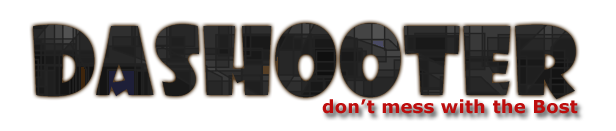
<style>
.page{position:relative;width:616px;height:131px;background:#ffffff}
.page>*{position:absolute;margin:0}
.t1{font:92px "ShowcardGothic-Reg";letter-spacing:0.01em;color:#222222}
.t2{font:18px "Verdana-Bold";letter-spacing:0.01em;color:#bd0d0d}
</style>
<div class="page">
<p class="t1" style="left:33px;top:23px;width:543px;height:77px">DASHOOTER</p>
<p class="t2" style="left:322px;top:99px;width:256px;height:15px">don’t mess with the Bost</p>
</div>
